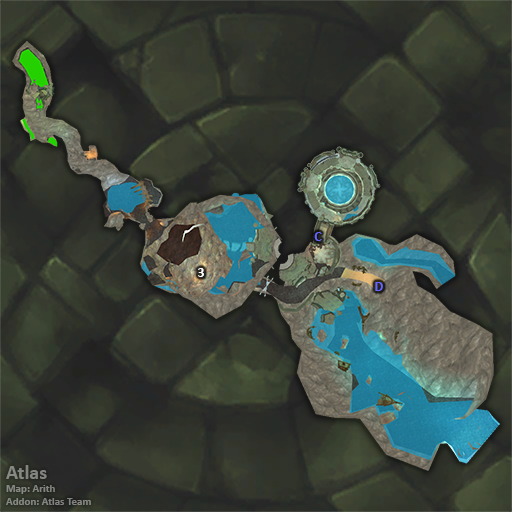
<style>
.page{position:relative;width:512px;height:512px}
.page>*{position:absolute;margin:0}
.t1{font:14px "Calibri-Bold";color:#6666ff}
.t2{font:14px "Calibri-Bold";color:#ffffff}
.t3{font:11px "Calibri-Bold";color:#848682}
.t4{font:20px "Calibri-Bold";color:#848682}
</style>
<div class="page">
<p class="t1" style="left:314px;top:232px;width:8px;height:9px">C</p>
<p class="t2" style="left:198px;top:268px;width:6px;height:9px">3</p>
<p class="t1" style="left:375px;top:282px;width:8px;height:9px">D</p>
<p class="t3" style="left:6px;top:465px;width:85px;height:40px"><span class="t4">Atlas<br></span>Map: Arith<br>Addon: Atlas Team</p>
</div>
